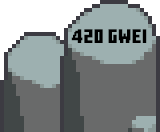
<style>
.page{position:relative;width:160px;height:132px;background:#696a6a}
.page>*{position:absolute;margin:0}
.t1{font:19.6px "MinecraftTen";letter-spacing:0.02em;color:#000000;scale:0.86 1}
</style>
<div class="page">
<p class="t1" style="left:71px;top:29px;width:76px;height:14px">420 gwei</p>
</div>
